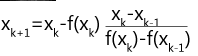
<style>
.page{position:relative;width:198px;height:56px;background:#ffffff}
.page>*{position:absolute;margin:0}
.t1{font:20px "MicrosoftTaiLe";color:#000000}
</style>
<div class="page">
<p class="t1" style="left:1px;top:10px;width:189px;height:42px">xk+1=xk-f(xk)  xk-xk-1<br>                   f(xk)-f(xk-1)</p>
</div>
